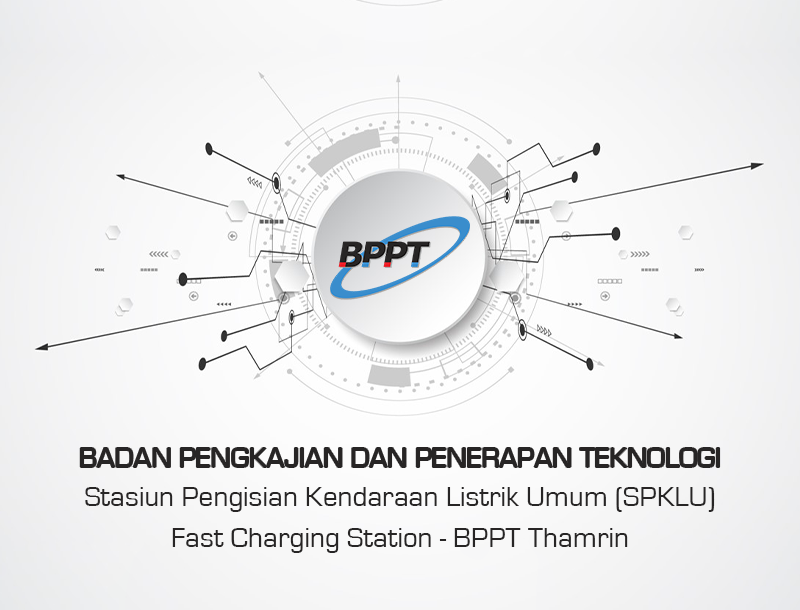
<style>
.page{position:relative;width:800px;height:610px}
.page>*{position:absolute;margin:0}
.t1{font:29.2px "EurostileRegular";color:#272525;text-transform:uppercase}
.t2{font:29.2px "EurostileRegular";color:#272525}
</style>
<div class="page">
<p class="t1" style="left:80px;top:448px;width:640px;height:19px">Badan Pengkajian dan Penerapan Teknologi</p>
<p class="t2" style="left:85px;top:487px;width:630px;height:25px">Stasiun Pengisian Kendaraan Listrik Umum (SPKLU)</p>
<p class="t2" style="left:172px;top:528px;width:456px;height:25px">Fast Charging Station - BPPT Thamrin</p>
</div>
